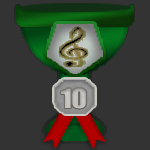
<style>
.page{position:relative;width:150px;height:150px;background:#333333}
.page>*{position:absolute;margin:0}
.t1{font:24.2px "Impact";color:#c2c0bc;scale:1.16 1}
</style>
<div class="page">
<p class="t1" style="left:61px;top:88px;width:25px;height:21px">10</p>
</div>
